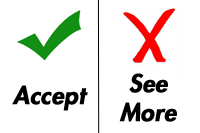
<style>
.page{position:relative;width:200px;height:133px;background:#ffffff}
.page>*{position:absolute;margin:0}
.t1{font:24px "FuturaLT-HeavyOblique";color:#000000;font-weight:bold}
</style>
<div class="page">
<p class="t1" style="left:119px;top:73px;width:58px;height:49px;text-align:center">See<br>More</p>
<p class="t1" style="left:12px;top:85px;width:76px;height:26px">Accept</p>
</div>
